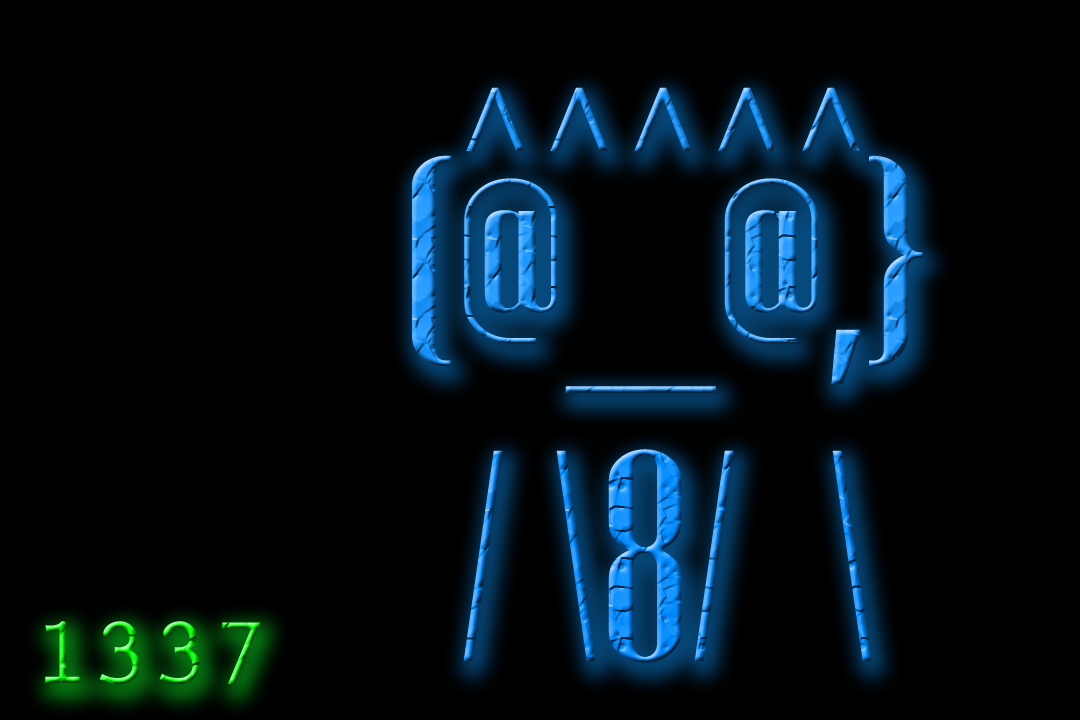
<style>
.page{position:relative;width:1080px;height:720px;background:#000000}
.page>*{position:absolute;margin:0}
.t1{font:300px "NiagaraSolid-Reg"}
</style>
<div class="page">
<p class="t1" style="left:466px;top:87px;width:394px;height:64px">^^^^^</p>
<p class="t1" style="left:412px;top:155px;width:511px;height:238px">(@__@,}</p>
<p class="t1" style="left:463px;top:449px;width:409px;height:214px">/ \8/  \</p>
</div>
